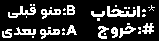
<style>
.page{position:relative;width:159px;height:41px;background:#000000}
.page>*{position:absolute;margin:0}
.t1{font:13.7px "Kalameh-Bold";letter-spacing:0.01em;color:#ffffff;scale:1.12 1}
.t2{font:16px "Kalameh-ExtraBold";letter-spacing:0.01em;color:#ffffff;scale:1.13 1}
.t3{font:16px "Kalameh-Light";letter-spacing:0.05em;color:#ffffff;scale:1.13 1}
.t4{font:13.7px "Kalameh-ExtraBold";letter-spacing:0.01em;color:#ffffff;scale:1.12 1}
.t5{font:15.2px "Kalameh-ExtraBold";letter-spacing:0.01em;color:#ffffff;scale:1.12 1}
</style>
<div class="page">
<p class="t1" style="left:8px;top:4px;width:67px;height:15px">B:منو قبلی</p>
<p class="t2" style="left:91px;top:5px;width:64px;height:16px"><span class="t3">*</span>:انتخاب</p>
<p class="t4" style="left:2px;top:25px;width:75px;height:14px">A:منو بعدی</p>
<p class="t5" style="left:98px;top:23px;width:56px;height:16px">#:خروج</p>
</div>
